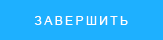
<style>
.page{position:relative;width:163px;height:40px;background:#1eb0ff}
.page>*{position:absolute;margin:0}
.t1{font:12px "ArialMT";letter-spacing:0.2em;color:#ffffff;text-transform:uppercase}
</style>
<div class="page">
<p class="t1" style="left:34px;top:16px;width:94px;height:9px">завершить</p>
</div>
